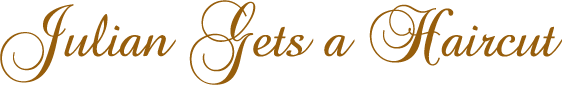
<style>
.page{position:relative;width:562px;height:85px;background:#ffffff}
.page>*{position:absolute;margin:0}
.t1{font:60px "BrockScript";letter-spacing:-0.025em;color:#975e0c}
</style>
<div class="page">
<p class="t1" style="left:0px;top:0px;width:562px;height:85px">Julian Gets a Haircut</p>
</div>
